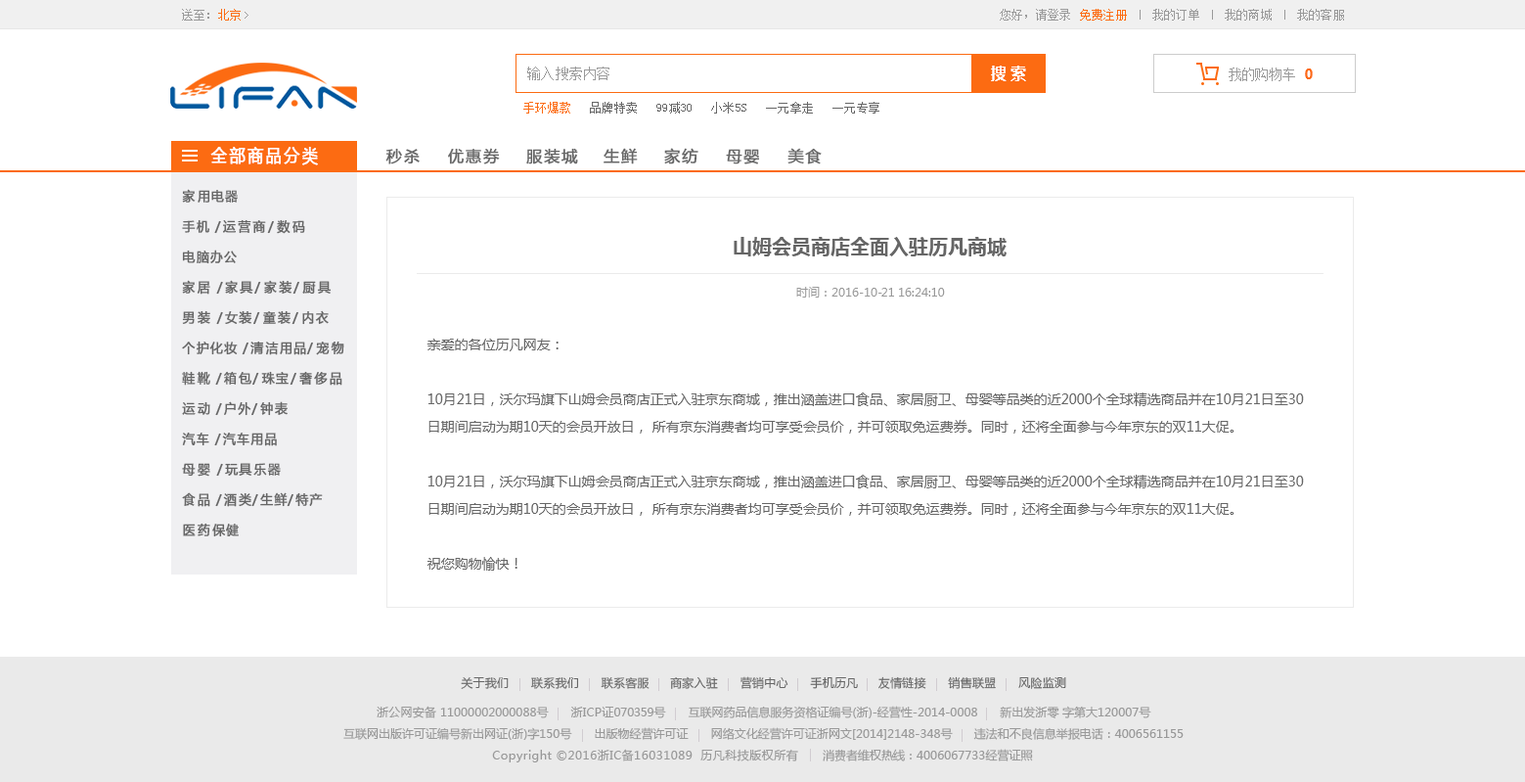
<style>
.page{position:relative;width:1525px;height:782px;background:#ffffff}
.page>*{position:absolute;margin:0}
.t1{font:11.7px "SimSun";letter-spacing:0.02em;color:#999999}
.t2{font:11.7px "SimSun";letter-spacing:0.02em;color:#fc6b12}
.t3{font:15.7px "MicrosoftYaHei-Bold";letter-spacing:0.02em;color:#ffffff}
.t4{font:13.7px "SimSun";letter-spacing:0.02em;color:#999999}
.t5{font:13.7px "SimSun";letter-spacing:-0.06em;color:#999999}
.t6{font:13.7px "MicrosoftYaHei-Bold";letter-spacing:-0.06em;color:#fc6b12}
.t7{font:11.7px "SimSun";letter-spacing:0.02em;color:#666666}
.t8{font:17.2px "MicrosoftYaHei";letter-spacing:0.1em;color:#ffffff;font-weight:bold;scale:0.91 1}
.t9{font:15.4px "MicrosoftYaHei";letter-spacing:0.06em;color:#666666;font-weight:bold}
.t10{font:12.9px "MicrosoftYaHei";letter-spacing:0.12em;color:#666666;font-weight:bold;scale:0.96 1}
.t11{font:19.6px "MicrosoftYaHei-Bold";color:#666666}
.t12{font:11.7px "MicrosoftYaHei";color:#999999}
.t13{font:13.7px "MicrosoftYaHei";color:#666666}
.t14{font:13.7px/27.4px "MicrosoftYaHei";color:#666666}
.t15{font:11.7px "MicrosoftYaHei";letter-spacing:0.02em;color:#666666}
.t16{font:11.7px "MicrosoftYaHei";letter-spacing:0.02em;color:#999999}
.t17{font:11.7px "MicrosoftYaHei";letter-spacing:-0.02em;color:#999999}
.t18{font:11.7px "MicrosoftYaHei";letter-spacing:0.04em;color:#999999}
</style>
<div class="page">
<p class="t1" style="left:182px;top:9px;width:59px;height:12px">送至：<span class="t2">北京</span></p>
<p class="t1" style="left:1000px;top:9px;width:70px;height:12px">您好，请登录</p>
<p class="t2" style="left:1080px;top:9px;width:47px;height:12px">免费注册</p>
<p class="t1" style="left:1153px;top:9px;width:47px;height:12px">我的订单</p>
<p class="t1" style="left:1225px;top:9px;width:47px;height:12px">我的商城</p>
<p class="t1" style="left:1297px;top:9px;width:47px;height:12px">我的客服</p>
<p class="t3" style="left:991px;top:66px;width:35px;height:15px">搜 索</p>
<p class="t4" style="left:527px;top:67px;width:83px;height:13px">输入搜索内容</p>
<p class="t5" style="left:1229px;top:68px;width:66px;height:13px">我的购物车</p>
<p class="t6" style="left:1305px;top:68px;width:8px;height:11px">0</p>
<p class="t2" style="left:523px;top:102px;width:47px;height:11px">手环爆款</p>
<p class="t7" style="left:590px;top:102px;width:47px;height:11px">品牌特卖</p>
<p class="t7" style="left:657px;top:102px;width:35px;height:11px">99减30</p>
<p class="t7" style="left:711px;top:102px;width:36px;height:11px">小米5S</p>
<p class="t7" style="left:766px;top:102px;width:47px;height:11px">一元拿走</p>
<p class="t7" style="left:833px;top:102px;width:47px;height:11px">一元专享</p>
<p class="t8" style="left:210px;top:147px;width:108px;height:18px">全部商品分类</p>
<p class="t9" style="left:385px;top:148px;width:35px;height:16px">秒杀</p>
<p class="t9" style="left:448px;top:148px;width:52px;height:16px">优惠券</p>
<p class="t9" style="left:526px;top:148px;width:52px;height:16px">服装城</p>
<p class="t9" style="left:604px;top:148px;width:34px;height:16px">生鲜</p>
<p class="t9" style="left:664px;top:148px;width:35px;height:16px">家纺</p>
<p class="t9" style="left:726px;top:149px;width:34px;height:15px">母婴</p>
<p class="t9" style="left:788px;top:148px;width:34px;height:16px">美食</p>
<p class="t10" style="left:182px;top:189px;width:56px;height:14px">家用电器</p>
<p class="t10" style="left:182px;top:219px;width:123px;height:15px">手机 /运营商/数码</p>
<p class="t11" style="left:734px;top:237px;width:273px;height:20px">山姆会员商店全面入驻历凡商城</p>
<p class="t10" style="left:182px;top:249px;width:55px;height:15px">电脑办公</p>
<p class="t10" style="left:182px;top:280px;width:150px;height:15px">家居 /家具/家装/厨具</p>
<p class="t12" style="left:796px;top:287px;width:149px;height:10px">时间：2016-10-21 16：24：10</p>
<p class="t10" style="left:182px;top:310px;width:147px;height:15px">男装 /女装/童装/内衣</p>
<p class="t10" style="left:182px;top:340px;width:162px;height:15px">个护化妆 /清洁用品/宠物</p>
<p class="t13" style="left:427px;top:339px;width:132px;height:12px">亲爱的各位历凡网友：</p>
<p class="t10" style="left:182px;top:371px;width:160px;height:14px">鞋靴 /箱包/珠宝/奢侈品</p>
<p class="t10" style="left:182px;top:401px;width:106px;height:15px">运动 /户外/钟表</p>
<p class="t14" style="left:428px;top:392px;width:876px;height:41px">10月21日，沃尔玛旗下山姆会员商店正式入驻京东商城，推出涵盖进口食品、家居厨卫、母婴等品类的近2000个全球精选商品并在10月21日至30<br>日期间启动为期10天的会员开放日， 所有京东消费者均可享受会员价，并可领取免运费券。同时，还将全面参与今年京东的双11大促。</p>
<p class="t10" style="left:182px;top:431px;width:95px;height:15px">汽车 /汽车用品</p>
<p class="t10" style="left:182px;top:463px;width:99px;height:13px">母婴 /玩具乐器</p>
<p class="t14" style="left:428px;top:475px;width:876px;height:41px">10月21日，沃尔玛旗下山姆会员商店正式入驻京东商城，推出涵盖进口食品、家居厨卫、母婴等品类的近2000个全球精选商品并在10月21日至30<br>日期间启动为期10天的会员开放日， 所有京东消费者均可享受会员价，并可领取免运费券。同时，还将全面参与今年京东的双11大促。</p>
<p class="t10" style="left:182px;top:492px;width:141px;height:15px">食品 /酒类/生鲜/特产</p>
<p class="t10" style="left:183px;top:522px;width:56px;height:15px">医药保健</p>
<p class="t13" style="left:428px;top:557px;width:90px;height:13px">祝您购物愉快！</p>
<p class="t15" style="left:461px;top:676px;width:605px;height:13px">关于我们      联系我们      联系客服     商家入驻      营销中心      手机历凡     友情链接      销售联盟      风险监测</p>
<p class="t12" style="left:377px;top:705px;width:775px;height:13px"><span class="t16">浙公网安备 </span>11000002000088<span class="t16">号      浙ICP证</span><span class="t17">070359号     </span>互联网药品信息服务资格证编号(<span class="t16">浙</span>)-经营性-2014-0008      新出发<span class="t16">浙</span>零 字第大120007号</p>
<p class="t12" style="left:343px;top:727px;width:841px;height:13px">互联网出版许可证编号新出网证(<span class="t16">浙</span>)字150号       出版物经营许可证       网络文化经营许可证<span class="t16">浙</span>网文[2014]2148-348号       违法和不良信息举报电话：4006561155</p>
<p class="t18" style="left:492px;top:748px;width:541px;height:14px"><span class="t12"><br><br></span>Copyright ©2016浙IC备16031089  历凡科技版权所有<span class="t12">       消费者维权热线：4006067733经营证照</span></p>
</div>
